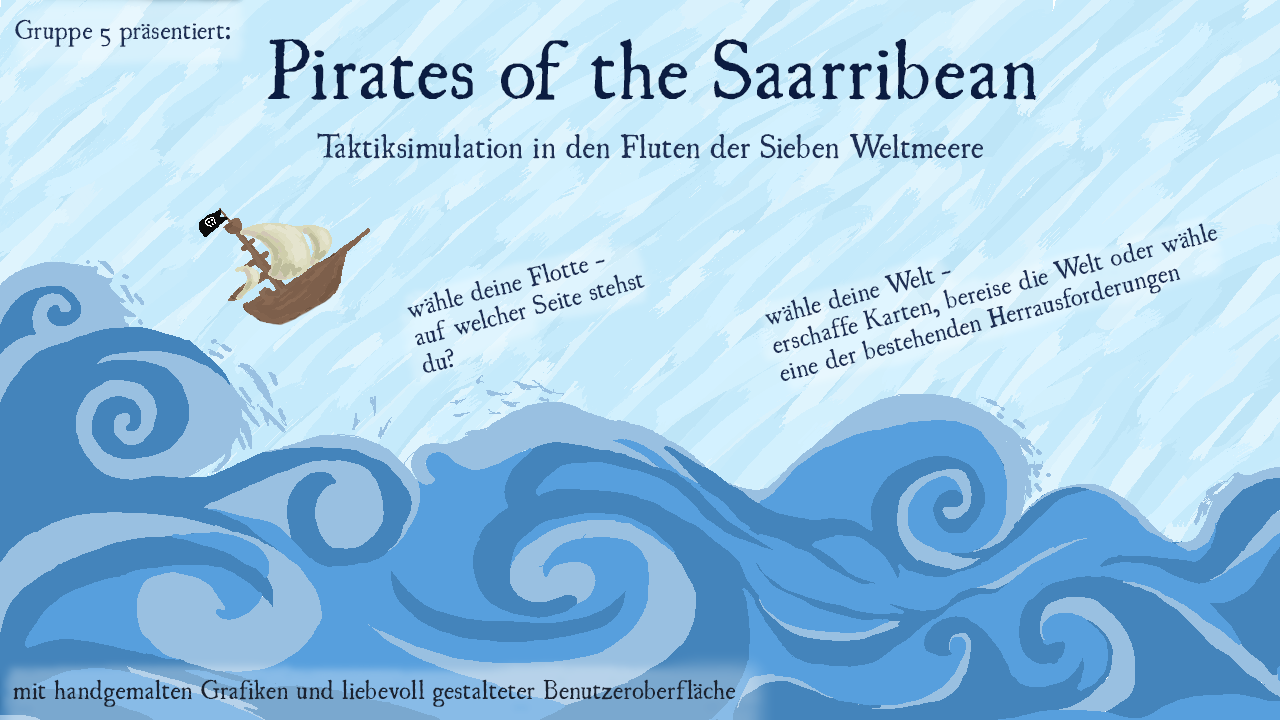
<style>
.page{position:relative;width:1280px;height:720px}
.page>*{position:absolute;margin:0}
.t1{font:24px "UglyQua";color:#1e2f55}
.t2{font:75px "UglyQua";color:#0b1c41}
.t3{font:30px "UglyQua";color:#1e2f55}
.t4{font:24px "UglyQua";color:#1b2230}
</style>
<div class="page">
<p class="t1" style="left:15px;top:19px;width:215px;height:28px">Gruppe 5 präsentiert:</p>
<p class="t2" style="left:267px;top:38px;width:770px;height:62px">Pirates of the Saarribean</p>
<p class="t3" style="left:317px;top:132px;width:666px;height:27px">Taktiksimulation in den Fluten der Sieben Weltmeere</p>
<p class="t1" style="left:765px;top:223px;width:453px;height:158px;rotate:-14deg">wähle deine Welt -<br>erschaffe Karten, bereise die Welt oder wähle eine der bestehenden Herrausforderungen</p>
<p class="t1" style="left:407px;top:259px;width:238px;height:114px;rotate:-15deg">wähle deine Flotte - <br>auf welcher Seite stehst du?</p>
<p class="t4" style="left:13px;top:679px;width:723px;height:28px">mit handgemalten Grafiken und liebevoll gestalteter Benutzeroberfläche</p>
</div>
